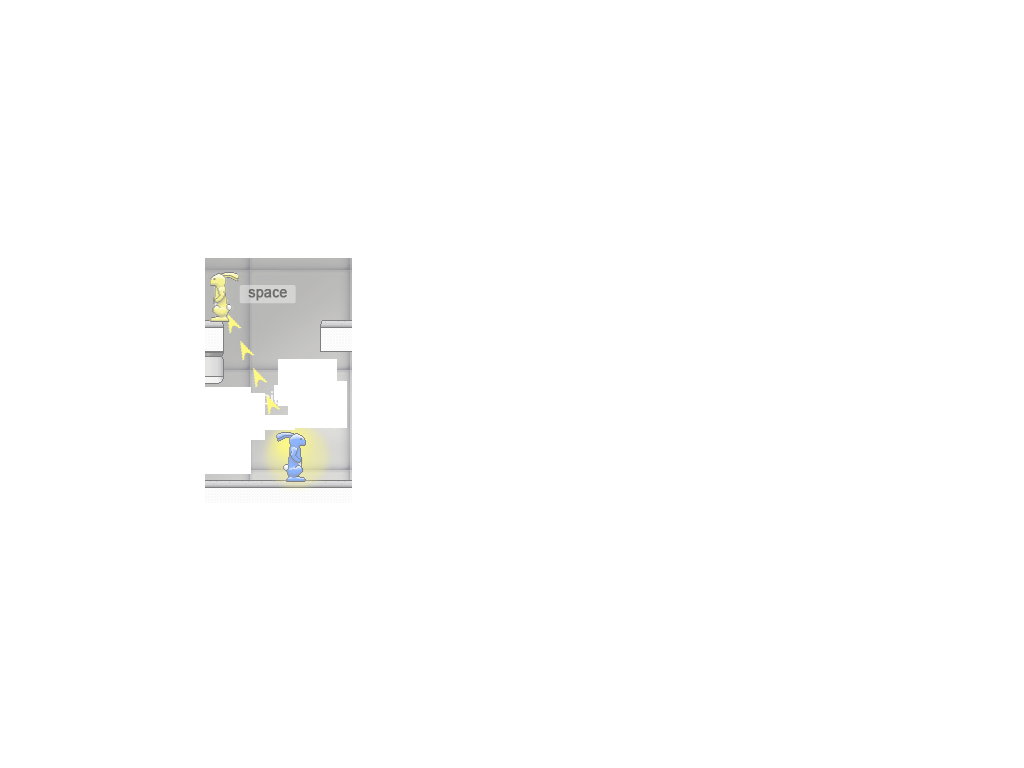
<style>
.page{position:relative;width:1024px;height:768px;background:#ffffff}
.page>*{position:absolute;margin:0}
.t1{font:14px "ArialMT";color:#6e6e6e;font-weight:bold}
</style>
<div class="page">
<p class="t1" style="left:248px;top:289px;width:39px;height:12px">space</p>
</div>
